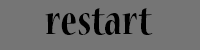
<style>
.page{position:relative;width:200px;height:50px;background:#757575}
.page>*{position:absolute;margin:0}
.t1{font:44px "NuevaStd-BoldCond";color:#000000}
</style>
<div class="page">
<p class="t1" style="left:45px;top:8px;width:108px;height:27px">restart</p>
</div>
